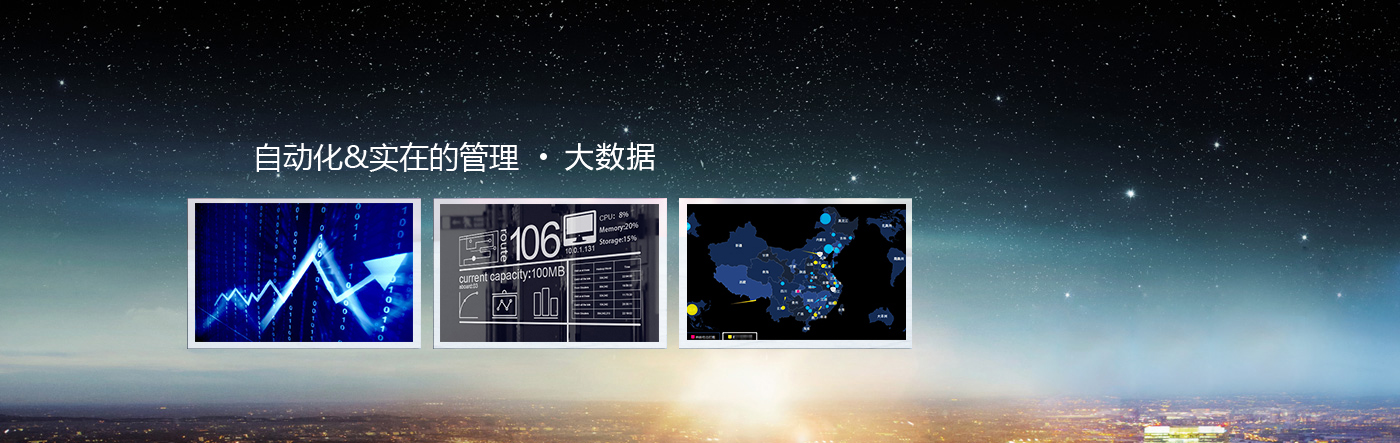
<style>
.page{position:relative;width:1400px;height:443px}
.page>*{position:absolute;margin:0}
.t1{font:30px "MicrosoftYaHei";color:#fefefe}
</style>
<div class="page">
<p class="t1" style="left:256px;top:142px;width:263px;height:30px">自动化&amp;实在的管理</p>
</div>
